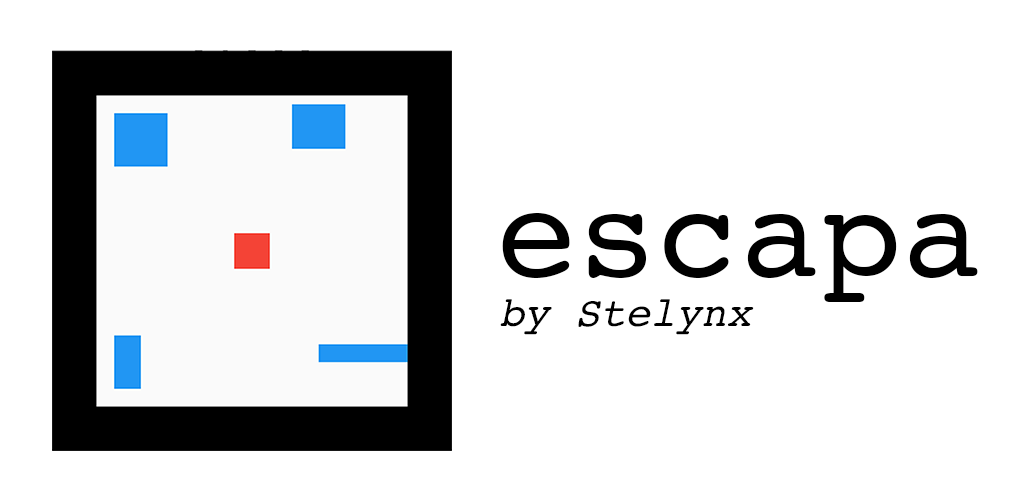
<style>
.page{position:relative;width:1024px;height:500px;background:#ffffff}
.page>*{position:absolute;margin:0}
.t1{font:42px "Courier-Oblique";color:#000000}
.t2{font:135px "Courier";color:#000000}
</style>
<div class="page">
<p class="t1" style="left:500px;top:213px;width:478px;height:122px;text-align:center"><span class="t2">escapa<br></span>by Stelynx</p>
</div>
